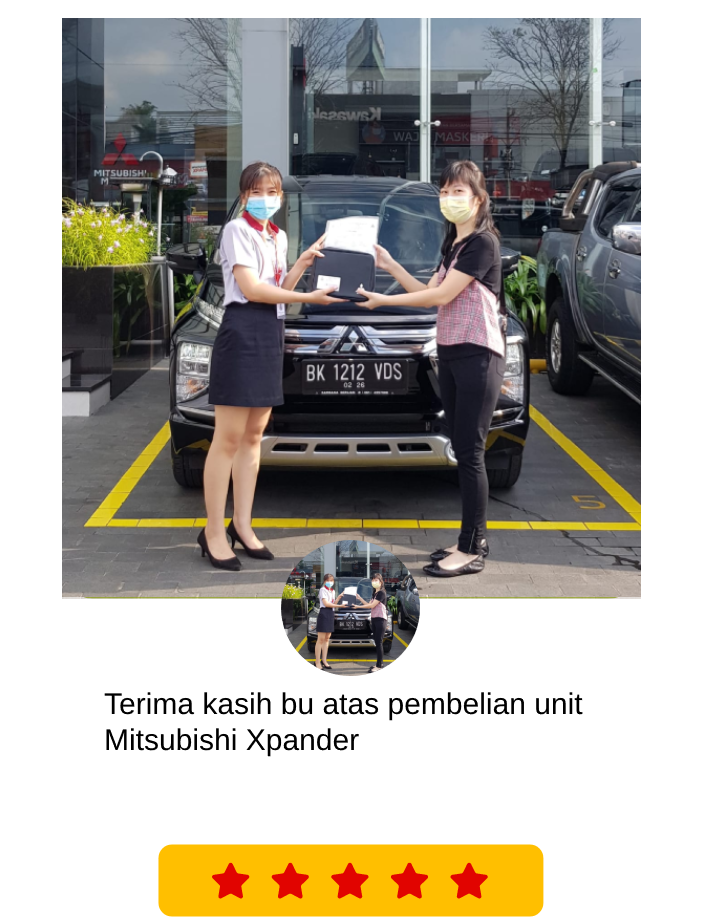
<style>
.page{position:relative;width:702px;height:921px;background:#ffffff}
.page>*{position:absolute;margin:0}
.t1{font:30px "UnBOffice";color:#000000}
</style>
<div class="page">
<p class="t1" style="left:104px;top:692px;width:479px;height:65px">Terima kasih bu atas pembelian unit Mitsubishi Xpander</p>
</div>
